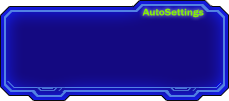
<style>
.page{position:relative;width:229px;height:101px;background:#140981}
.page>*{position:absolute;margin:0}
.t1{font:9.8px "FranklinGothic-Medium";color:#84f400;scale:1.14 1}
</style>
<div class="page">
<p class="t1" style="left:142px;top:8px;width:62px;height:10px">AutoSettings</p>
</div>
